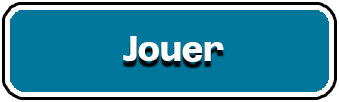
<style>
.page{position:relative;width:339px;height:102px;background:#00769a}
.page>*{position:absolute;margin:0}
.t1{font:33.8px "Oddlini-ExtraBold";color:#ffffff}
</style>
<div class="page">
<p class="t1" style="left:123px;top:36px;width:101px;height:26px">Jouer</p>
</div>
